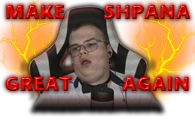
<style>
.page{position:relative;width:195px;height:120px}
.page>*{position:absolute;margin:0}
.t1{font:20px "SegoeUIBlack"}
</style>
<div class="page">
<p class="t1" style="left:5px;top:5px;width:186px;height:86px">MAKE       SHPANA <br><br><br> GREAT         AGAIN</p>
</div>
